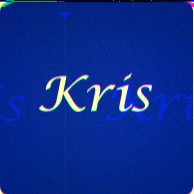
<style>
.page{position:relative;width:194px;height:194px}
.page>*{position:absolute;margin:0}
.t1{font:48px "LucidaCalligraphy-Italic"}
</style>
<div class="page">
<p class="t1" style="left:38px;top:71px;width:114px;height:39px">Kris</p>
</div>
